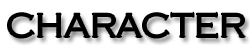
<style>
.page{position:relative;width:250px;height:50px;background:#ffffff}
.page>*{position:absolute;margin:0}
.t1{font:35px "CopperplateGothic-Light";color:#000000}
</style>
<div class="page">
<p class="t1" style="left:8px;top:12px;width:237px;height:26px">CHARACTER</p>
</div>
